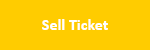
<style>
.page{position:relative;width:150px;height:50px;background:#ffcc00}
.page>*{position:absolute;margin:0}
.t1{font:16px "Calibri-Bold";color:#ffffff}
</style>
<div class="page">
<p class="t1" style="left:42px;top:19px;width:66px;height:11px">Sell Ticket</p>
</div>
